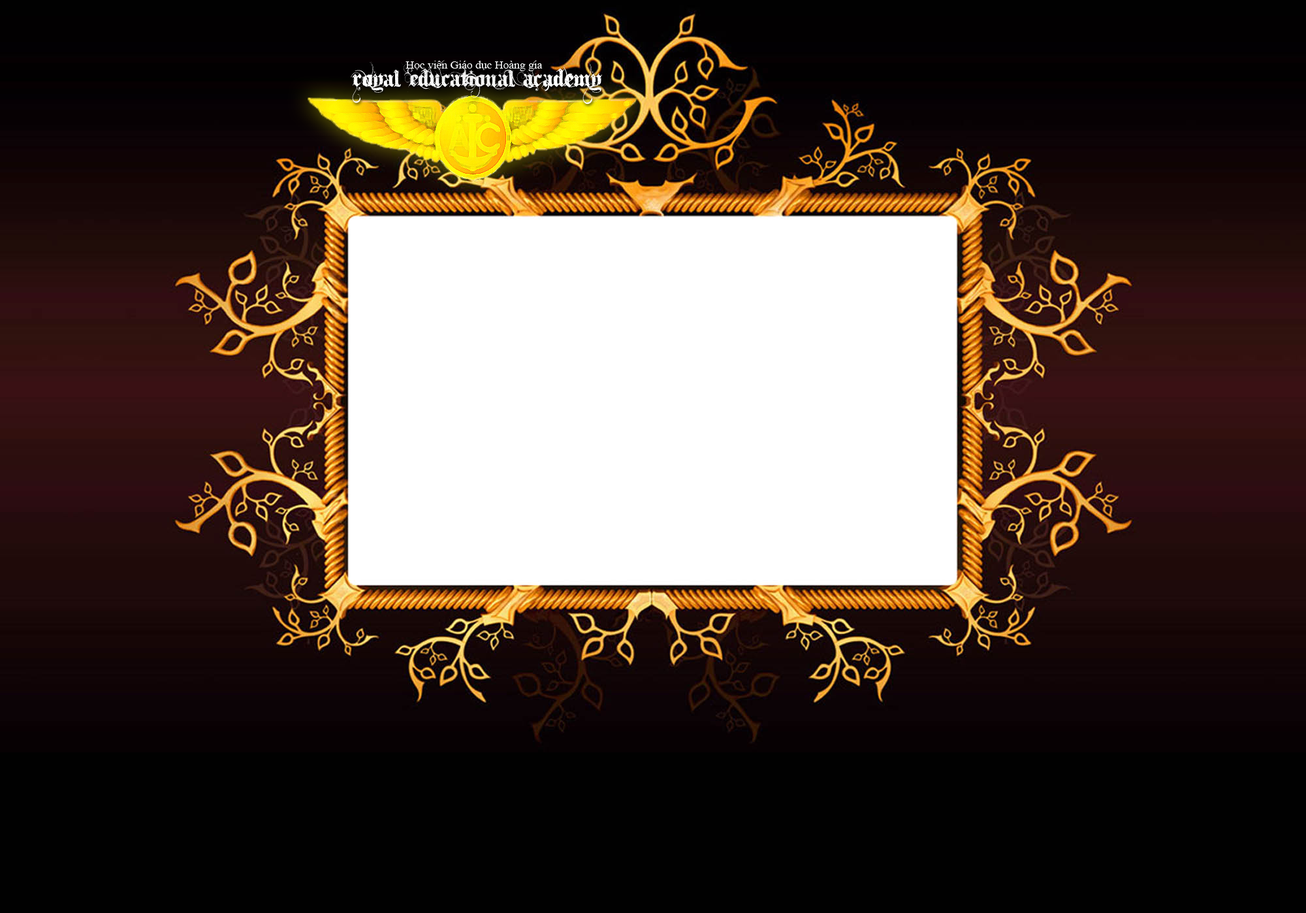
<style>
.page{position:relative;width:1306px;height:913px}
.page>*{position:absolute;margin:0}
.t1{font:38px "Ithornët";color:#ffffff;scale:0.84 1}
.t2{font:10.9px "TimesNewRomanPSMT";color:#ffffff;scale:1.05 1}
</style>
<div class="page">
<p class="t1" style="left:351px;top:60px;width:251px;height:44px">Royal Educational Academy</p>
<p class="t2" style="left:406px;top:61px;width:137px;height:10px">Học viện Giáo dục Hoàng gia</p>
</div>
